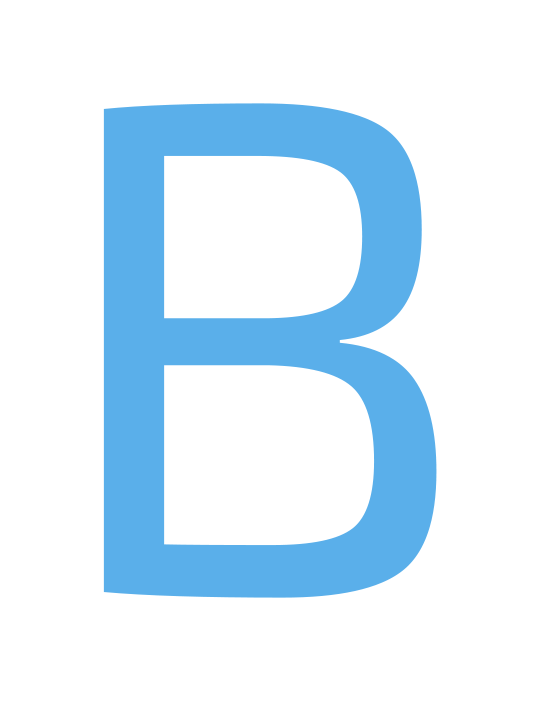
<style>
.page{position:relative;width:540px;height:702px;background:#ffffff}
.page>*{position:absolute;margin:0}
.t1{font:700px "Exo2-Regular";color:#5aafea}
</style>
<div class="page">
<p class="t1" style="left:103px;top:103px;width:334px;height:495px">B</p>
</div>
